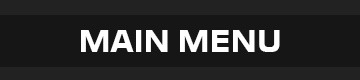
<style>
.page{position:relative;width:360px;height:80px;background:#161616}
.page>*{position:absolute;margin:0}
.t1{font:30px "Moire-Bold";color:#ffffff}
</style>
<div class="page">
<p class="t1" style="left:81px;top:30px;width:199px;height:22px">MAIN MENU</p>
</div>
